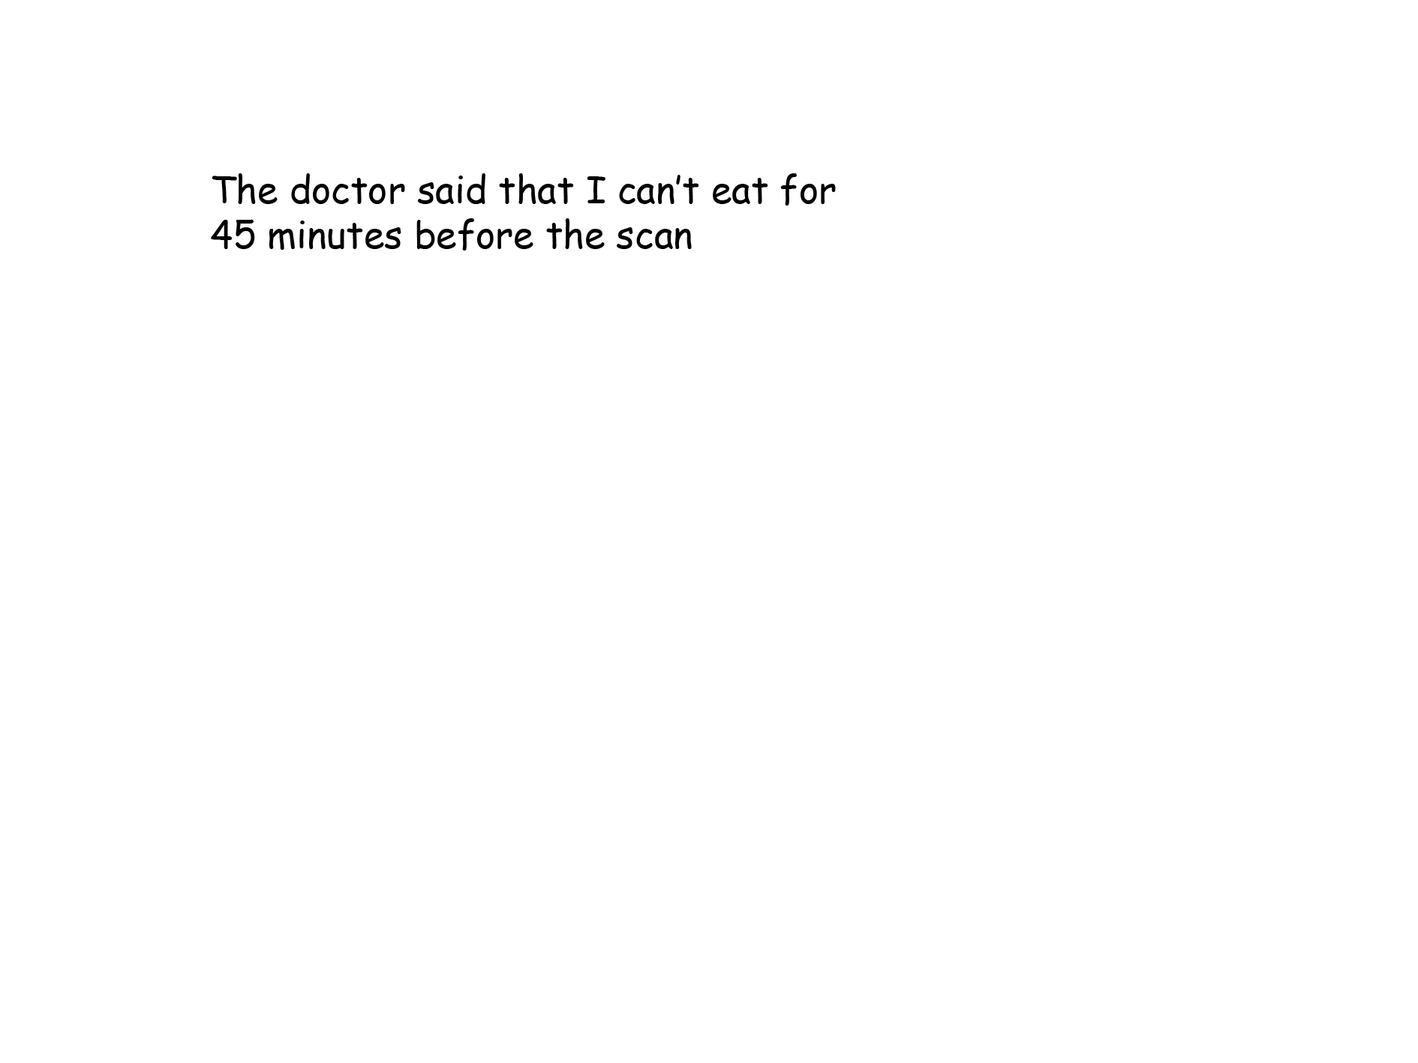
<style>
.page{position:relative;width:1418px;height:1063px;background:#ffffff}
.page>*{position:absolute;margin:0}
.t1{font:9px "ComicSansMS";color:#000000}
</style>
<div class="page">
<p class="t1" style="left:211px;top:173px;width:625px;height:77px">The doctor said that I can’t eat for <br>45 minutes before the scan</p>
</div>
